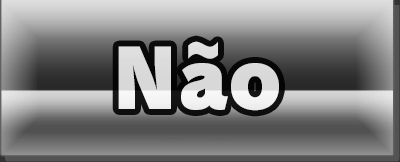
<style>
.page{position:relative;width:400px;height:162px}
.page>*{position:absolute;margin:0}
.t1{font:80px "RodinPro-UB";color:#dcdcdc}
</style>
<div class="page">
<p class="t1" style="left:118px;top:41px;width:161px;height:70px">Não</p>
</div>
